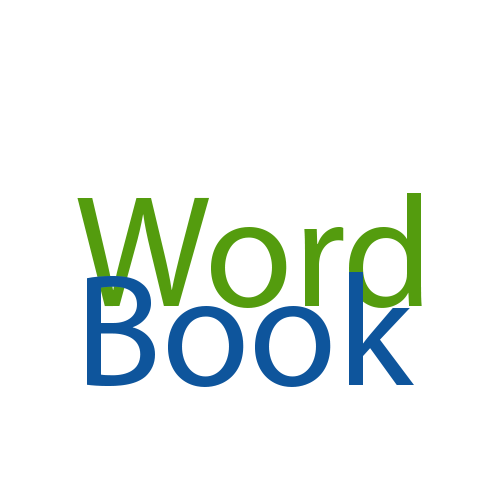
<style>
.page{position:relative;width:500px;height:500px;background:#ffffff}
.page>*{position:absolute;margin:0}
.t1{font:159.7px "MyriadPro-Regular";color:#549c0e}
.t2{font:159.7px "MyriadPro-Regular";color:#0e559c}
</style>
<div class="page">
<p class="t1" style="left:77px;top:193px;width:345px;height:115px">Word</p>
<p class="t2" style="left:87px;top:272px;width:327px;height:115px">Book</p>
</div>
